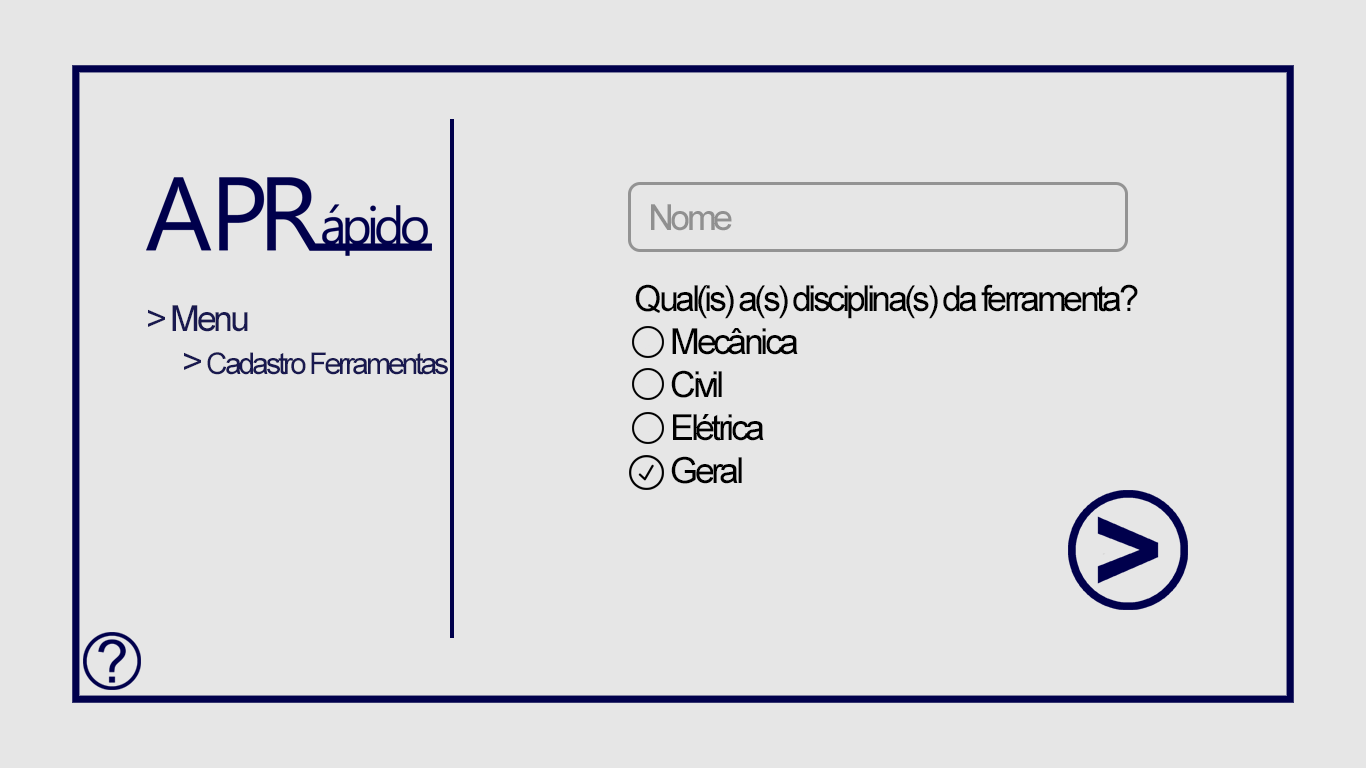
<style>
.page{position:relative;width:1366px;height:768px;background:#e6e6e6}
.page>*{position:absolute;margin:0}
.t1{font:36px "ArialMT";letter-spacing:-0.1em;color:#909090}
.t2{font:36px "ArialMT";letter-spacing:-0.1em;color:#000000}
.t3{font:30px "ArialMT";letter-spacing:-0.1em;color:#19194f}
.t4{font:36px "ArialMT";letter-spacing:-0.095em;color:#19194f}
</style>
<div class="page">
<p class="t1" style="left:651px;top:204px;width:81px;height:27px">Nome</p>
<p class="t2" style="left:635px;top:284px;width:503px;height:200px">Qual(is) a(s) disciplina(s) da ferramenta?<br> Mecânica<br> Civil<br> Elétrica<br> Geral</p>
<p class="t3" style="left:148px;top:305px;width:300px;height:70px"><span class="t4">&gt; Menu<br> &gt; </span>Cadastro Ferramentas</p>
</div>
